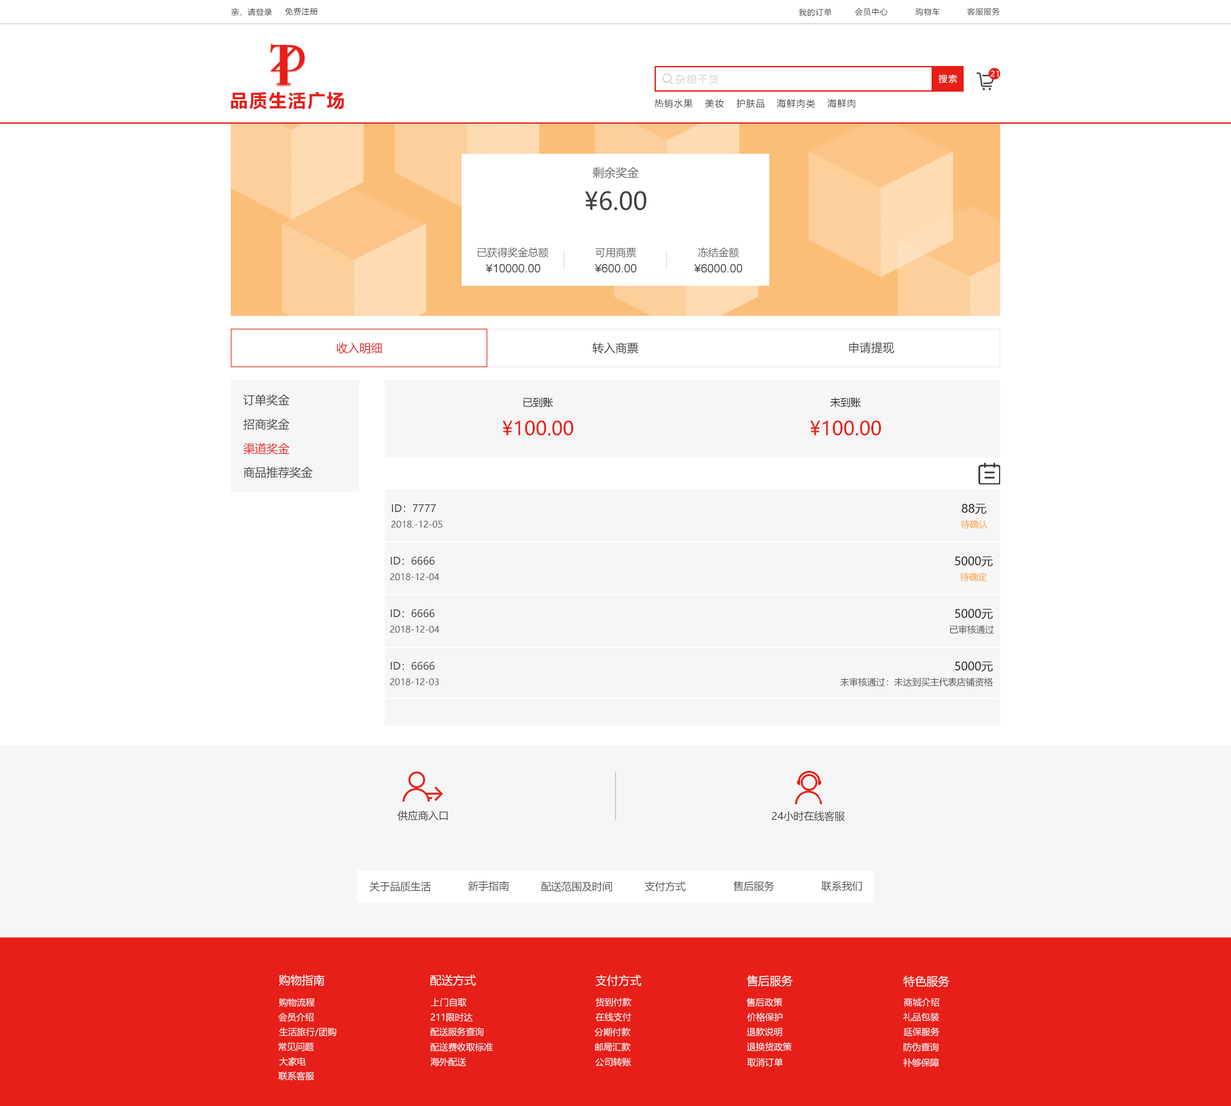
<style>
.page{position:relative;width:1231px;height:1106px;background:#ffffff}
.page>*{position:absolute;margin:0}
.t1{font:7.7px "MicrosoftYaHei";letter-spacing:0.08em;color:#404040}
.t2{font:10.3px "MicrosoftYaHei";letter-spacing:0.08em;color:#d6d6d6}
.t3{font:9px "MicrosoftYaHei";letter-spacing:0.08em;color:#ffffff}
.t4{font:7.7px "MicrosoftYaHei";letter-spacing:0.08em;color:#ffffff}
.t5{font:17.9px "MicrosoftYaHei-Bold";letter-spacing:0.08em;color:#e61f18}
.t6{font:9px "MicrosoftYaHei";letter-spacing:0.08em;color:#404040}
.t7{font:11.5px "MicrosoftYaHei";color:#666666}
.t8{font:24.4px "MicrosoftYaHei";color:#404040}
.t9{font:10.3px "MicrosoftYaHei";color:#666666}
.t10{font:11.5px "ArialMT";color:#404040}
.t11{font:11.5px "MicrosoftYaHei";color:#e61f18}
.t12{font:11.5px "MicrosoftYaHei";color:#404040}
.t13{font:10.3px "MicrosoftYaHei";color:#202020}
.t14{font:19.2px "MicrosoftYaHei";color:#e61f18}
.t15{font:10.3px "MicrosoftYaHei";color:#404040}
.t16{font:11.5px "MicrosoftYaHei";color:#202020}
.t17{font:9px "MicrosoftYaHei";color:#505050}
.t18{font:9px "MicrosoftYaHei";color:#f99f36}
.t19{font:10.3px "MicrosoftYaHei";color:#505050}
.t20{font:11.5px "MicrosoftYaHei";color:#ffffff}
.t21{font:9px "MicrosoftYaHei";color:#ffffff}
</style>
<div class="page">
<p class="t1" style="left:231px;top:8px;width:41px;height:8px">亲，请登录</p>
<p class="t1" style="left:285px;top:8px;width:33px;height:7px">免费注册</p>
<p class="t1" style="left:799px;top:8px;width:32px;height:8px">我的订单</p>
<p class="t1" style="left:854px;top:8px;width:34px;height:8px">会员中心</p>
<p class="t1" style="left:915px;top:8px;width:25px;height:8px">购物车</p>
<p class="t1" style="left:967px;top:8px;width:33px;height:7px">客服服务</p>
<p class="t2" style="left:675px;top:74px;width:44px;height:11px">杂粮干货</p>
<p class="t3" style="left:938px;top:74px;width:19px;height:9px">搜索</p>
<p class="t4" style="left:990px;top:71px;width:9px;height:6px">21</p>
<p class="t5" style="left:231px;top:92px;width:113px;height:18px">品质生活广场</p>
<p class="t6" style="left:654px;top:99px;width:39px;height:9px">热销水果</p>
<p class="t6" style="left:705px;top:99px;width:19px;height:9px">美妆</p>
<p class="t6" style="left:737px;top:99px;width:27px;height:9px">护肤品</p>
<p class="t6" style="left:776px;top:99px;width:39px;height:9px">海鲜肉类</p>
<p class="t6" style="left:827px;top:99px;width:28px;height:9px">海鲜肉</p>
<p class="t7" style="left:592px;top:167px;width:47px;height:12px">剩余奖金</p>
<p class="t8" style="left:585px;top:191px;width:61px;height:19px">¥6.00</p>
<p class="t9" style="left:477px;top:247px;width:72px;height:11px">已获得奖金总额</p>
<p class="t9" style="left:595px;top:247px;width:41px;height:11px">可用商票</p>
<p class="t9" style="left:698px;top:247px;width:41px;height:11px">冻结金额</p>
<p class="t10" style="left:486px;top:264px;width:54px;height:9px">¥10000.00</p>
<p class="t10" style="left:595px;top:264px;width:42px;height:9px">¥600.00</p>
<p class="t10" style="left:694px;top:264px;width:48px;height:9px">¥6000.00</p>
<p class="t11" style="left:337px;top:342px;width:45px;height:12px">收入明细</p>
<p class="t12" style="left:592px;top:342px;width:46px;height:12px">转入商票</p>
<p class="t12" style="left:849px;top:342px;width:45px;height:12px">申请提现</p>
<p class="t12" style="left:243px;top:394px;width:47px;height:12px">订单奖金</p>
<p class="t13" style="left:523px;top:397px;width:30px;height:11px">已到账</p>
<p class="t13" style="left:830px;top:397px;width:31px;height:11px">未到账</p>
<p class="t12" style="left:243px;top:419px;width:47px;height:11px">招商奖金</p>
<p class="t14" style="left:502px;top:421px;width:71px;height:15px">¥100.00</p>
<p class="t14" style="left:810px;top:421px;width:71px;height:15px">¥100.00</p>
<p class="t11" style="left:243px;top:443px;width:47px;height:11px">渠道奖金</p>
<p class="t12" style="left:244px;top:467px;width:69px;height:11px">商品推荐奖金</p>
<p class="t15" style="left:392px;top:504px;width:44px;height:9px">ID：7777</p>
<p class="t16" style="left:962px;top:504px;width:25px;height:11px">88元</p>
<p class="t17" style="left:391px;top:521px;width:51px;height:7px">2018.-12-05</p>
<p class="t18" style="left:960px;top:520px;width:28px;height:9px">待确认</p>
<p class="t15" style="left:390px;top:556px;width:45px;height:9px">ID：6666</p>
<p class="t16" style="left:955px;top:556px;width:38px;height:11px">5000元</p>
<p class="t17" style="left:390px;top:573px;width:49px;height:8px">2018-12-04</p>
<p class="t18" style="left:960px;top:572px;width:27px;height:10px">待确定</p>
<p class="t15" style="left:390px;top:609px;width:45px;height:9px">ID：6666</p>
<p class="t16" style="left:955px;top:609px;width:38px;height:11px">5000元</p>
<p class="t17" style="left:390px;top:626px;width:49px;height:7px">2018-12-04</p>
<p class="t17" style="left:949px;top:625px;width:45px;height:10px">已审核通过</p>
<p class="t15" style="left:390px;top:662px;width:45px;height:9px">ID：6666</p>
<p class="t16" style="left:955px;top:662px;width:38px;height:10px">5000元</p>
<p class="t17" style="left:840px;top:678px;width:153px;height:9px">未审核通过：未达到买主代表店铺资格</p>
<p class="t17" style="left:390px;top:678px;width:49px;height:8px">2018-12-03</p>
<p class="t15" style="left:397px;top:810px;width:50px;height:11px">供应商入口</p>
<p class="t15" style="left:772px;top:811px;width:73px;height:11px">24小时在线客服</p>
<p class="t19" style="left:369px;top:881px;width:62px;height:11px">关于品质生活</p>
<p class="t19" style="left:468px;top:881px;width:41px;height:11px">新手指南</p>
<p class="t19" style="left:541px;top:881px;width:71px;height:11px">配送范围及时间</p>
<p class="t19" style="left:644px;top:881px;width:42px;height:11px">支付方式</p>
<p class="t19" style="left:733px;top:881px;width:41px;height:11px">售后服务</p>
<p class="t19" style="left:821px;top:881px;width:41px;height:11px">联系我们</p>
<p class="t20" style="left:279px;top:975px;width:45px;height:12px">购物指南</p>
<p class="t20" style="left:430px;top:975px;width:46px;height:12px">配送方式</p>
<p class="t20" style="left:596px;top:975px;width:46px;height:12px">支付方式</p>
<p class="t20" style="left:746px;top:975px;width:47px;height:12px">售后服务</p>
<p class="t20" style="left:903px;top:976px;width:46px;height:12px">特色服务</p>
<p class="t21" style="left:279px;top:998px;width:36px;height:9px">购物流程</p>
<p class="t21" style="left:431px;top:998px;width:36px;height:9px">上门自取</p>
<p class="t21" style="left:596px;top:998px;width:35px;height:9px">货到付款</p>
<p class="t21" style="left:746px;top:998px;width:36px;height:9px">售后政策</p>
<p class="t21" style="left:903px;top:998px;width:36px;height:9px">商城介绍</p>
<p class="t21" style="left:278px;top:1013px;width:35px;height:9px">会员介绍</p>
<p class="t21" style="left:430px;top:1013px;width:43px;height:9px">211限时达</p>
<p class="t21" style="left:596px;top:1013px;width:35px;height:9px">在线支付</p>
<p class="t21" style="left:747px;top:1013px;width:36px;height:9px">价格保护</p>
<p class="t21" style="left:903px;top:1013px;width:36px;height:9px">礼品包装</p>
<p class="t21" style="left:279px;top:1028px;width:58px;height:9px">生活旅行/团购</p>
<p class="t21" style="left:430px;top:1028px;width:53px;height:9px">配送服务查询</p>
<p class="t21" style="left:594px;top:1028px;width:36px;height:9px">分期付款</p>
<p class="t21" style="left:747px;top:1028px;width:35px;height:9px">退款说明</p>
<p class="t21" style="left:903px;top:1028px;width:37px;height:9px">延保服务</p>
<p class="t21" style="left:278px;top:1043px;width:36px;height:9px">常见问题</p>
<p class="t21" style="left:430px;top:1043px;width:63px;height:9px">配送费收取标准</p>
<p class="t21" style="left:595px;top:1043px;width:35px;height:9px">邮局汇款</p>
<p class="t21" style="left:747px;top:1042px;width:45px;height:10px">退换货政策</p>
<p class="t21" style="left:903px;top:1043px;width:35px;height:9px">防伪查询</p>
<p class="t21" style="left:279px;top:1057px;width:27px;height:10px">大家电</p>
<p class="t21" style="left:430px;top:1058px;width:36px;height:9px">海外配送</p>
<p class="t21" style="left:595px;top:1058px;width:36px;height:9px">公司转账</p>
<p class="t21" style="left:747px;top:1058px;width:36px;height:9px">取消订单</p>
<p class="t21" style="left:903px;top:1058px;width:36px;height:10px">补够保障</p>
<p class="t21" style="left:278px;top:1072px;width:36px;height:9px">联系客服</p>
</div>
